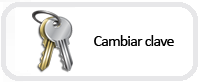
<style>
.page{position:relative;width:199px;height:82px;background:#ffffff}
.page>*{position:absolute;margin:0}
.t1{font:15.7px "Calibri";letter-spacing:-0.045em;color:#000000}
</style>
<div class="page">
<p class="t1" style="left:94px;top:35px;width:80px;height:11px">Cambiar clave</p>
</div>
